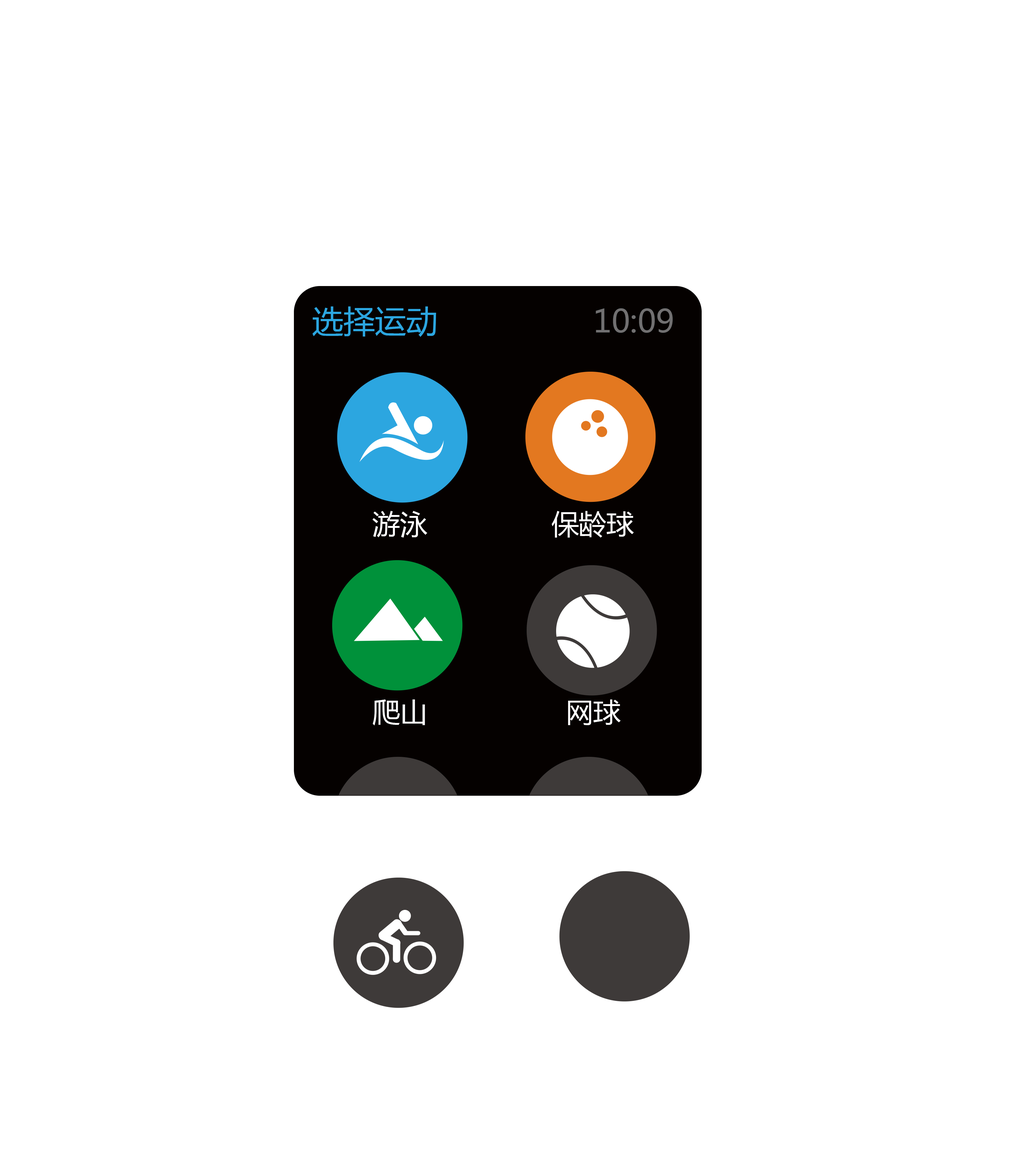
<style>
.page{position:relative;width:1026px;height:1163px;background:#ffffff}
.page>*{position:absolute;margin:0}
.t1{font:31.4px "MicrosoftYaHei";color:#2ca6e0}
.t2{font:31.4px "MicrosoftYaHei";color:#717071}
.t3{font:27.4px "MicrosoftYaHei";color:#ffffff}
</style>
<div class="page">
<p class="t1" style="left:312px;top:306px;width:124px;height:31px">选择运动</p>
<p class="t2" style="left:595px;top:308px;width:78px;height:25px">10:09</p>
<p class="t3" style="left:372px;top:511px;width:55px;height:26px">游泳</p>
<p class="t3" style="left:552px;top:511px;width:82px;height:26px">保龄球</p>
<p class="t3" style="left:372px;top:699px;width:53px;height:26px">爬山</p>
<p class="t3" style="left:568px;top:699px;width:53px;height:26px">网球</p>
</div>
